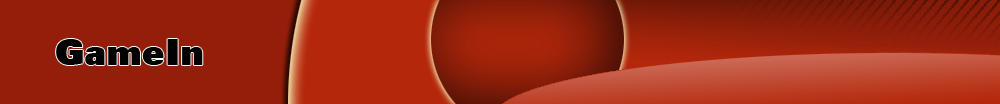
<style>
.page{position:relative;width:1000px;height:104px;background:#951e0a}
.page>*{position:absolute;margin:0}
.t1{font:36px "ZurichBT-ExtraBlack";color:#010101}
</style>
<div class="page">
<p class="t1" style="left:56px;top:39px;width:147px;height:26px">GameIn</p>
</div>
